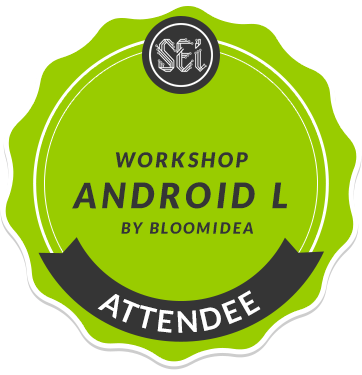
<style>
.page{position:relative;width:362px;height:375px;background:#99cc00}
.page>*{position:absolute;margin:0}
.t1{font:20.6px "Lato-BlackItalic";letter-spacing:0.14em;color:#353535}
.t2{font:35px "Lato-BlackItalic";letter-spacing:0.14em;color:#353535}
.t3{font:15.6px "Lato-BlackItalic";letter-spacing:0.14em;color:#353535}
.t4{font:29.7px "Lato-Bold";letter-spacing:0.1em;color:#ffffff}
</style>
<div class="page">
<p class="t1" style="left:115px;top:152px;width:133px;height:16px">WORKSHOP</p>
<p class="t2" style="left:72px;top:182px;width:215px;height:27px">ANDROID L</p>
<p class="t3" style="left:121px;top:222px;width:132px;height:12px">BY BLOOMIDEA</p>
<p class="t4" style="left:97px;top:290px;width:164px;height:43px">ATTENDEE</p>
</div>
